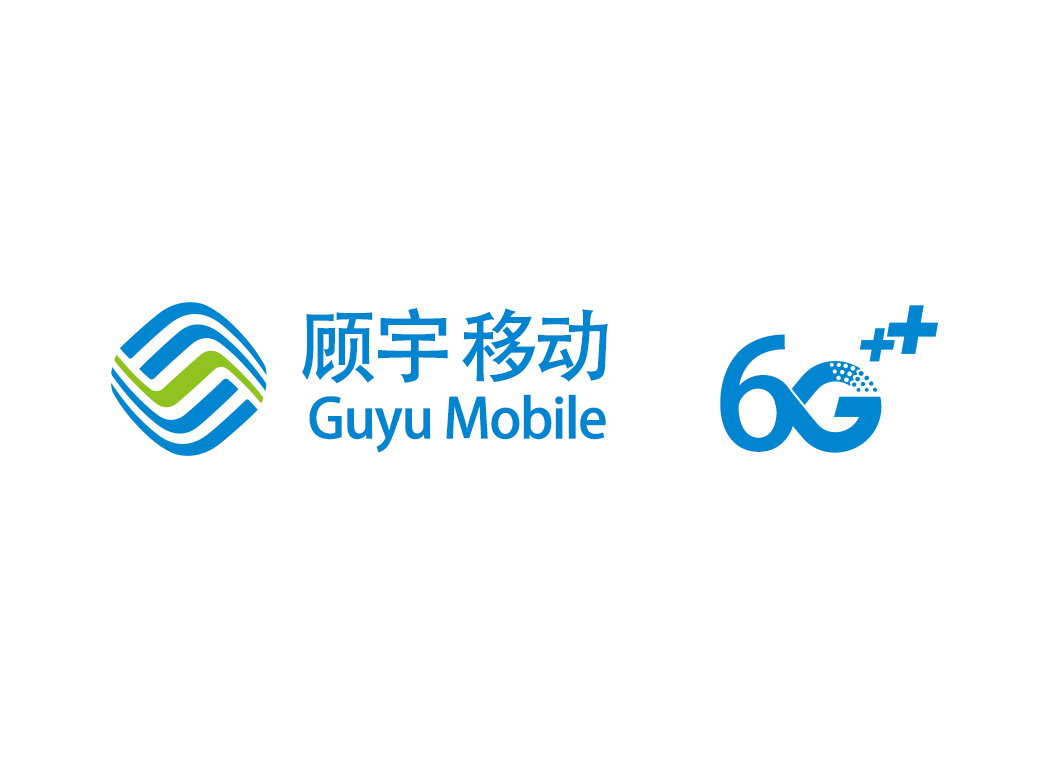
<style>
.page{position:relative;width:1050px;height:758px;background:#ffffff}
.page>*{position:absolute;margin:0}
.t1{font:79.2px "AdobeHeitiStd-Regular";letter-spacing:-0.09em;color:#0185d0;font-weight:bold}
.t2{font:150px "AdobeHeitiStd-Regular";letter-spacing:-0.05em;color:#0185d0;font-weight:bold}
.t3{font:54.2px "AdobeHeitiStd-Regular";letter-spacing:-0.05em;color:#0185d0;font-weight:bold}
</style>
<div class="page">
<p class="t1" style="left:302px;top:308px;width:306px;height:76px">顾宇 移动</p>
<p class="t2" style="left:720px;top:334px;width:75px;height:118px">6</p>
<p class="t3" style="left:309px;top:394px;width:297px;height:59px">Guyu Mobile</p>
</div>
